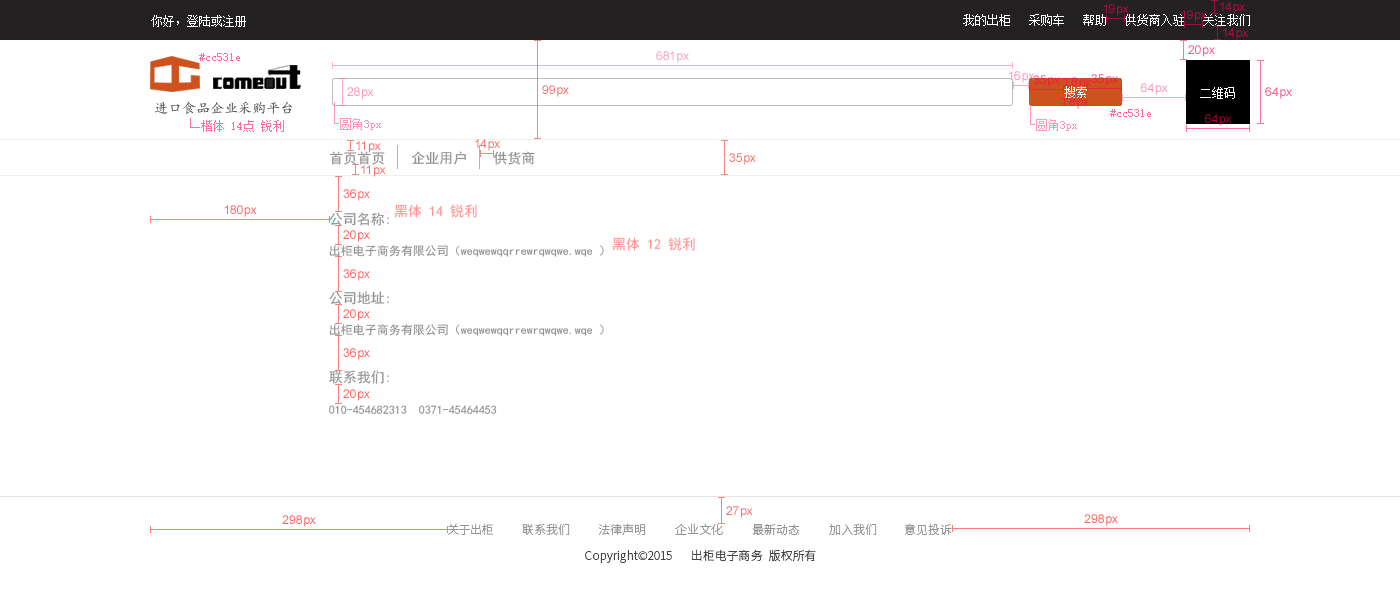
<style>
.page{position:relative;width:1400px;height:600px;background:#ffffff}
.page>*{position:absolute;margin:0}
.t1{font:12px "SimSun";color:#ffffff}
.t2{font:12px "SimSun";color:#fc6f9a}
.t3{font:14px "¿¬Ìå";color:#464343}
.t4{font:14px "SimHei";color:#959495}
.t5{font:14px "SimHei";color:#ff9696}
.t6{font:12px "SimHei";color:#959495}
.t7{font:12px "SourceHanSansCN-Light";color:#959495}
.t8{font:12px "SourceHanSansCN-Light";color:#434343}
</style>
<div class="page">
<p class="t1" style="left:151px;top:15px;width:95px;height:12px">你好，登陆或注册</p>
<p class="t1" style="left:963px;top:14px;width:287px;height:12px">我的出柜   采购车   帮助   供货商入驻   关注我们</p>
<p class="t2" style="left:199px;top:53px;width:41px;height:8px">#cc531e</p>
<p class="t1" style="left:1064px;top:86px;width:23px;height:12px">搜索</p>
<p class="t1" style="left:1200px;top:87px;width:35px;height:12px">二维码</p>
<p class="t3" style="left:154px;top:101px;width:138px;height:14px">进口食品企业采购平台</p>
<p class="t2" style="left:1110px;top:109px;width:41px;height:8px">#cc531e</p>
<p class="t4" style="left:329px;top:151px;width:56px;height:14px">首页首页</p>
<p class="t4" style="left:411px;top:151px;width:55px;height:14px">企业用户</p>
<p class="t4" style="left:493px;top:151px;width:42px;height:14px">供货商</p>
<p class="t5" style="left:394px;top:204px;width:83px;height:14px">黑体 14 锐利</p>
<p class="t4" style="left:329px;top:212px;width:60px;height:14px">公司名称:</p>
<p class="t6" style="left:329px;top:245px;width:275px;height:12px">出柜电子商务有限公司（weqwewqqrrewrqwqwe.wqe ）</p>
<p class="t5" style="left:612px;top:237px;width:83px;height:14px">黑体 12 锐利</p>
<p class="t4" style="left:329px;top:291px;width:60px;height:14px">公司地址:</p>
<p class="t6" style="left:329px;top:324px;width:275px;height:12px">出柜电子商务有限公司（weqwewqqrrewrqwqwe.wqe ）</p>
<p class="t4" style="left:329px;top:370px;width:60px;height:14px">联系我们:</p>
<p class="t6" style="left:329px;top:405px;width:168px;height:9px">010-454682313  0371-45464453</p>
<p class="t7" style="left:448px;top:523px;width:45px;height:12px">关于出柜</p>
<p class="t7" style="left:522px;top:523px;width:48px;height:12px">联系我们</p>
<p class="t7" style="left:598px;top:523px;width:48px;height:12px">法律声明</p>
<p class="t7" style="left:675px;top:523px;width:48px;height:12px">企业文化</p>
<p class="t7" style="left:752px;top:524px;width:48px;height:12px">最新动态</p>
<p class="t7" style="left:829px;top:523px;width:48px;height:12px">加入我们</p>
<p class="t7" style="left:904px;top:523px;width:48px;height:13px">意见投诉</p>
<p class="t8" style="left:585px;top:550px;width:87px;height:13px">Copyright©2015</p>
<p class="t8" style="left:691px;top:549px;width:72px;height:12px">出柜电子商务</p>
<p class="t8" style="left:769px;top:549px;width:47px;height:13px">版权所有</p>
</div>
